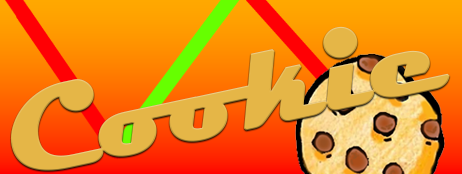
<style>
.page{position:relative;width:462px;height:174px}
.page>*{position:absolute;margin:0}
.t1{font:120px "Magneto-Bold";color:#e5b647;font-weight:bold}
</style>
<div class="page">
<p class="t1" style="left:10px;top:26px;width:440px;height:145px;rotate:-12deg">Cookie</p>
</div>
